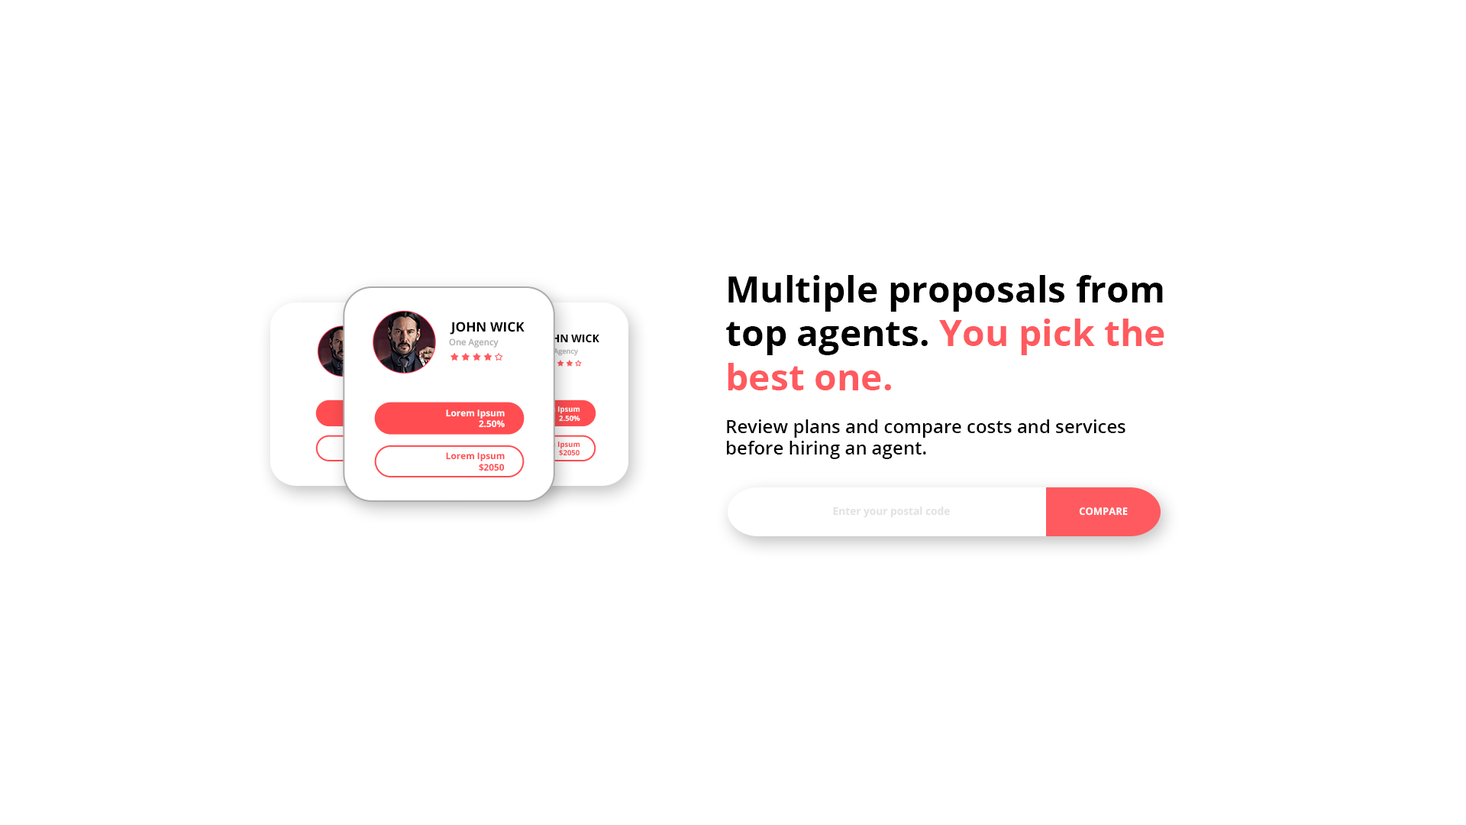
<style>
.page{position:relative;width:1466px;height:825px;background:#ffffff}
.page>*{position:absolute;margin:0}
.t1{font:36.7px "OpenSans-Bold";color:#000000}
.t2{font:36.7px "OpenSans-Bold";color:#ff5a5f}
.t3{font:13.1px "OpenSans-Bold";color:#000000}
.t4{font:8.8px "OpenSans-Semibold";color:#afafaf}
.t5{font:10.7px "OpenSans-Bold";color:#000000}
.t6{font:7.1px "OpenSans-Semibold";color:#afafaf}
.t7{font:9px "OpenSans-Bold";color:#ffffff}
.t8{font:7.3px "OpenSans-Bold";color:#ffffff}
.t9{font:18.3px "OpenSans-Semibold";color:#000000}
.t10{font:7.3px "OpenSans-Bold"}
.t11{font:7.3px "OpenSans-Bold";color:#ff4d51}
.t12{font:9px "OpenSans-Bold";color:#ff4d51}
.t13{font:10.6px "OpenSans-Bold";color:#e2e2e2}
.t14{font:10.1px "OpenSans-Bold";color:#ffffff}
</style>
<div class="page">
<p class="t1" style="left:726px;top:275px;width:439px;height:115px">Multiple proposals from <br>top agents. <span class="t2">You pick the <br>best one.</span></p>
<p class="t3" style="left:450px;top:322px;width:75px;height:12px">JOHN WICK</p>
<p class="t4" style="left:449px;top:338px;width:50px;height:9px">One Agency</p>
<p class="t5" style="left:538px;top:334px;width:61px;height:11px">JOHN WICK</p>
<p class="t6" style="left:538px;top:348px;width:40px;height:8px">One Agency</p>
<p class="t7" style="left:446px;top:409px;width:59px;height:9px">Lorem Ipsum</p>
<p class="t8" style="left:532px;top:406px;width:48px;height:8px">Lorem Ipsum</p>
<p class="t7" style="left:479px;top:420px;width:26px;height:8px">2.50%</p>
<p class="t8" style="left:559px;top:415px;width:21px;height:7px">2.50%</p>
<p class="t9" style="left:727px;top:419px;width:399px;height:40px">Review plans and compare costs and services <br>before hiring an agent.</p>
<p class="t10" style="left:532px;top:441px;width:48px;height:8px">Lorem Ipsum</p>
<p class="t11" style="left:559px;top:449px;width:21px;height:7px">$2050</p>
<p class="t12" style="left:446px;top:452px;width:59px;height:9px">Lorem Ipsum</p>
<p class="t12" style="left:479px;top:464px;width:26px;height:7px">$2050</p>
<p class="t13" style="left:833px;top:506px;width:117px;height:12px">Enter your postal code</p>
<p class="t14" style="left:1079px;top:507px;width:49px;height:8px">COMPARE</p>
</div>
